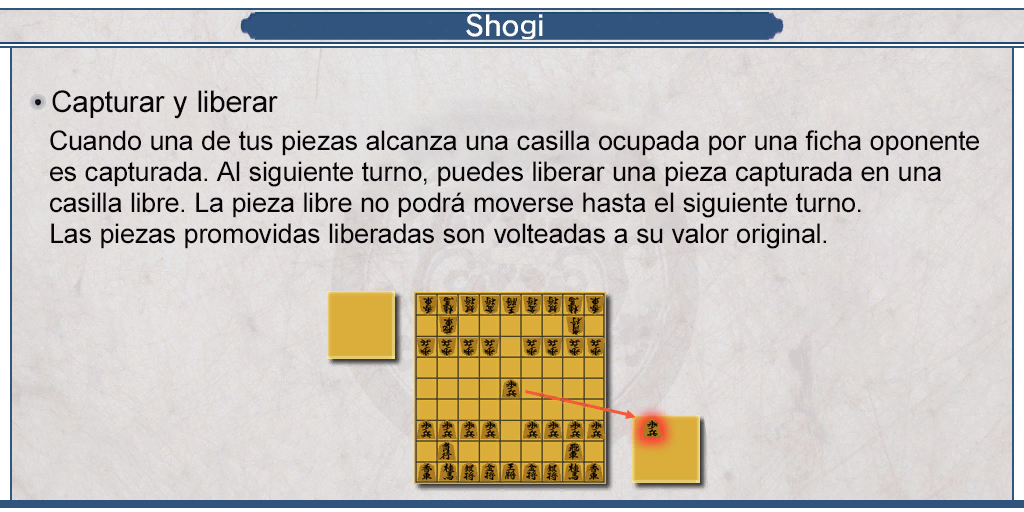
<style>
.page{position:relative;width:1024px;height:512px}
.page>*{position:absolute;margin:0}
.t1{font:30px "ArialMT";color:#080408}
.t2{font:27px/31px "ArialMT";color:#080408}
</style>
<div class="page">
<p class="t1" style="left:52px;top:90px;width:226px;height:29px">Capturar y liberar</p>
<p class="t2" style="left:50px;top:130px;width:929px;height:119px">Cuando una de tus piezas alcanza una casilla ocupada por una ficha oponente <br>es capturada. Al siguiente turno, puedes liberar una pieza capturada en una <br>casilla libre. La pieza libre no podrá moverse hasta el siguiente turno. <br>Las piezas promovidas liberadas son volteadas a su valor original.</p>
</div>
